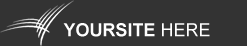
<style>
.page{position:relative;width:247px;height:46px;background:#333333}
.page>*{position:absolute;margin:0}
.t1{font:18px "Arial-BoldMT";color:#ffffff}
.t2{font:18px "ArialMT";color:#ffffff}
</style>
<div class="page">
<p class="t1" style="left:63px;top:23px;width:147px;height:14px">YOURSITE <span class="t2">HERE</span></p>
</div>
